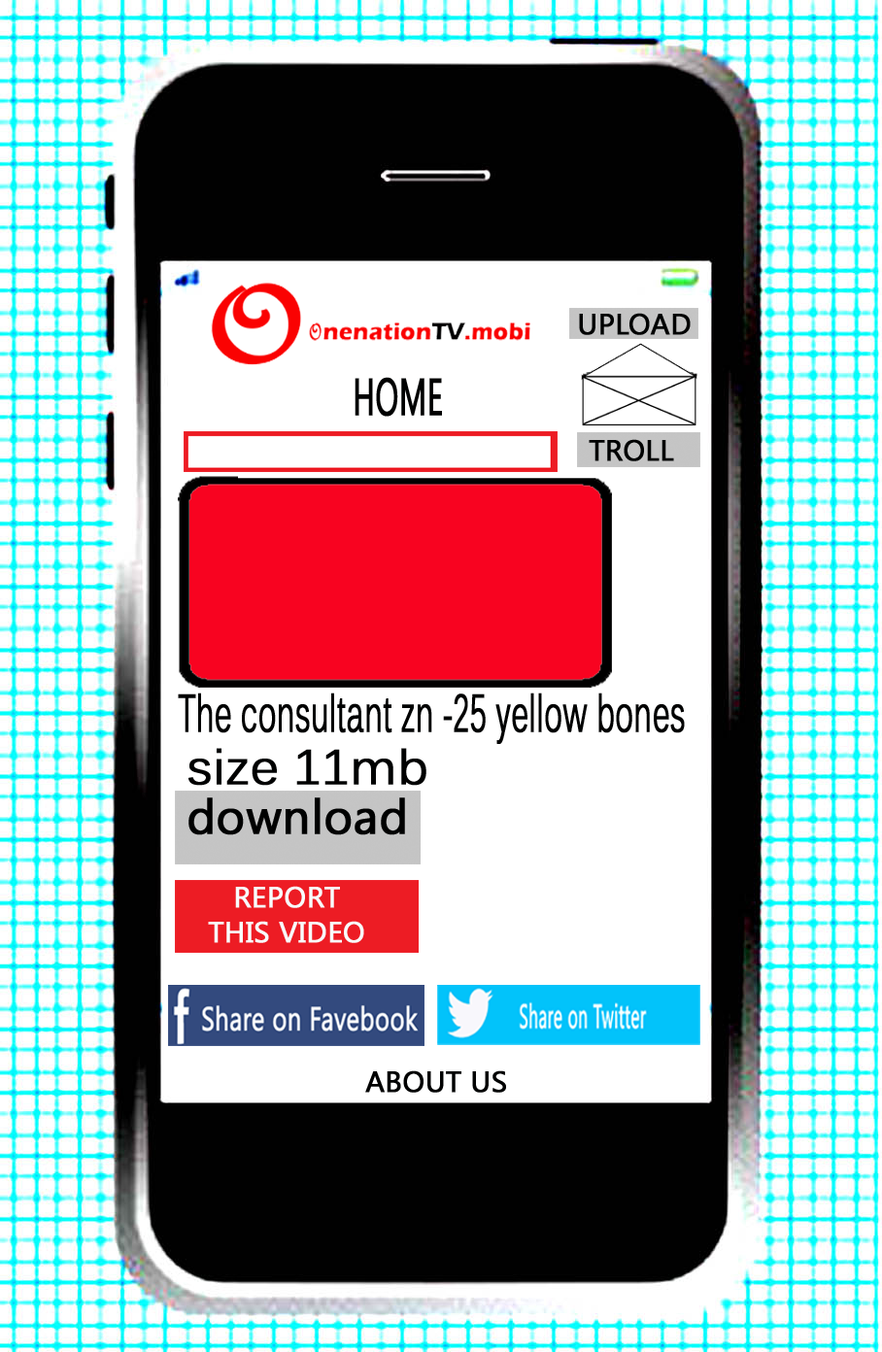
<style>
.page{position:relative;width:882px;height:1352px;background:#ffffff}
.page>*{position:absolute;margin:0}
.t1{font:29px "KhmerUI";color:#000202;font-weight:bold}
.t2{font:51.9px "KhmerUI";color:#000101;font-weight:bold;scale:0.59 1}
.t3{font:52.3px "Kalinga";color:#000101;font-weight:bold;scale:0.55 1}
.t4{font:48.4px "Kalinga";color:#000101;font-weight:bold}
.t5{font:48.4px "KhmerUI";color:#000101;font-weight:bold}
.t6{font:29px "KhmerUI";color:#f8fdfd;font-weight:bold}
.t7{font:29px "KhmerUI";color:#000101;font-weight:bold}
</style>
<div class="page">
<p class="t1" style="left:579px;top:313px;width:112px;height:22px">UPLOAD</p>
<p class="t2" style="left:355px;top:377px;width:87px;height:40px">HOME</p>
<p class="t1" style="left:589px;top:439px;width:85px;height:22px">TROLL</p>
<p class="t3" style="left:178px;top:693px;width:507px;height:51px">The consultant zn -25 yellow bones</p>
<p class="t4" style="left:188px;top:748px;width:238px;height:38px">size 11mb</p>
<p class="t5" style="left:188px;top:797px;width:217px;height:38px">download</p>
<p class="t6" style="left:208px;top:886px;width:156px;height:57px;text-align:center">REPORT <br>THIS VIDEO</p>
<p class="t7" style="left:365px;top:1070px;width:141px;height:23px">ABOUT US</p>
</div>
